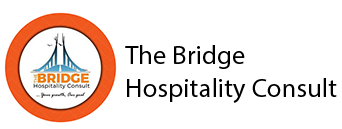
<style>
.page{position:relative;width:342px;height:129px;background:#ffffff}
.page>*{position:absolute;margin:0}
.t1{font:26.8px "MyriadPro-Regular";color:#000000}
</style>
<div class="page">
<p class="t1" style="left:125px;top:45px;width:212px;height:58px">The Bridge<br>Hospitality Consult</p>
</div>
